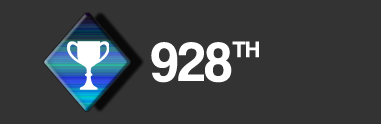
<style>
.page{position:relative;width:381px;height:124px;background:#333333}
.page>*{position:absolute;margin:0}
.t1{font:23.5px "CoolveticaRg-Regular";color:#ffffff}
.t2{font:56.4px "CoolveticaRg-Regular";color:#ffffff}
</style>
<div class="page">
<p class="t1" style="left:232px;top:41px;width:27px;height:17px">TH</p>
<p class="t2" style="left:151px;top:42px;width:81px;height:41px">928</p>
</div>
